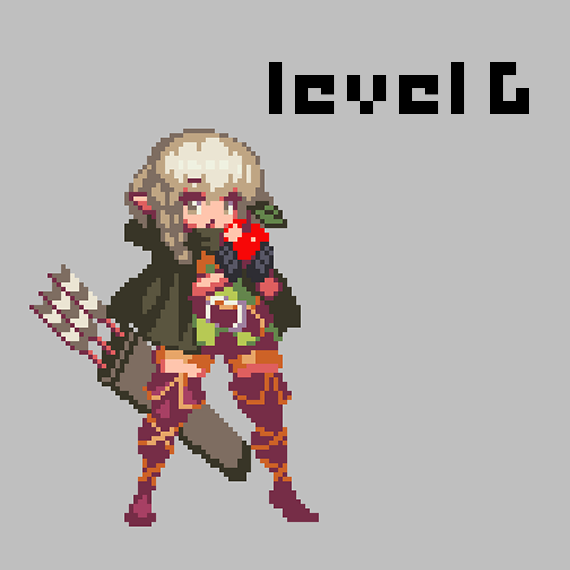
<style>
.page{position:relative;width:570px;height:570px;background:#bfbfbf}
.page>*{position:absolute;margin:0}
.t1{font:104px "game-over";color:#000000}
</style>
<div class="page">
<p class="t1" style="left:269px;top:62px;width:260px;height:52px">Level 6</p>
</div>
